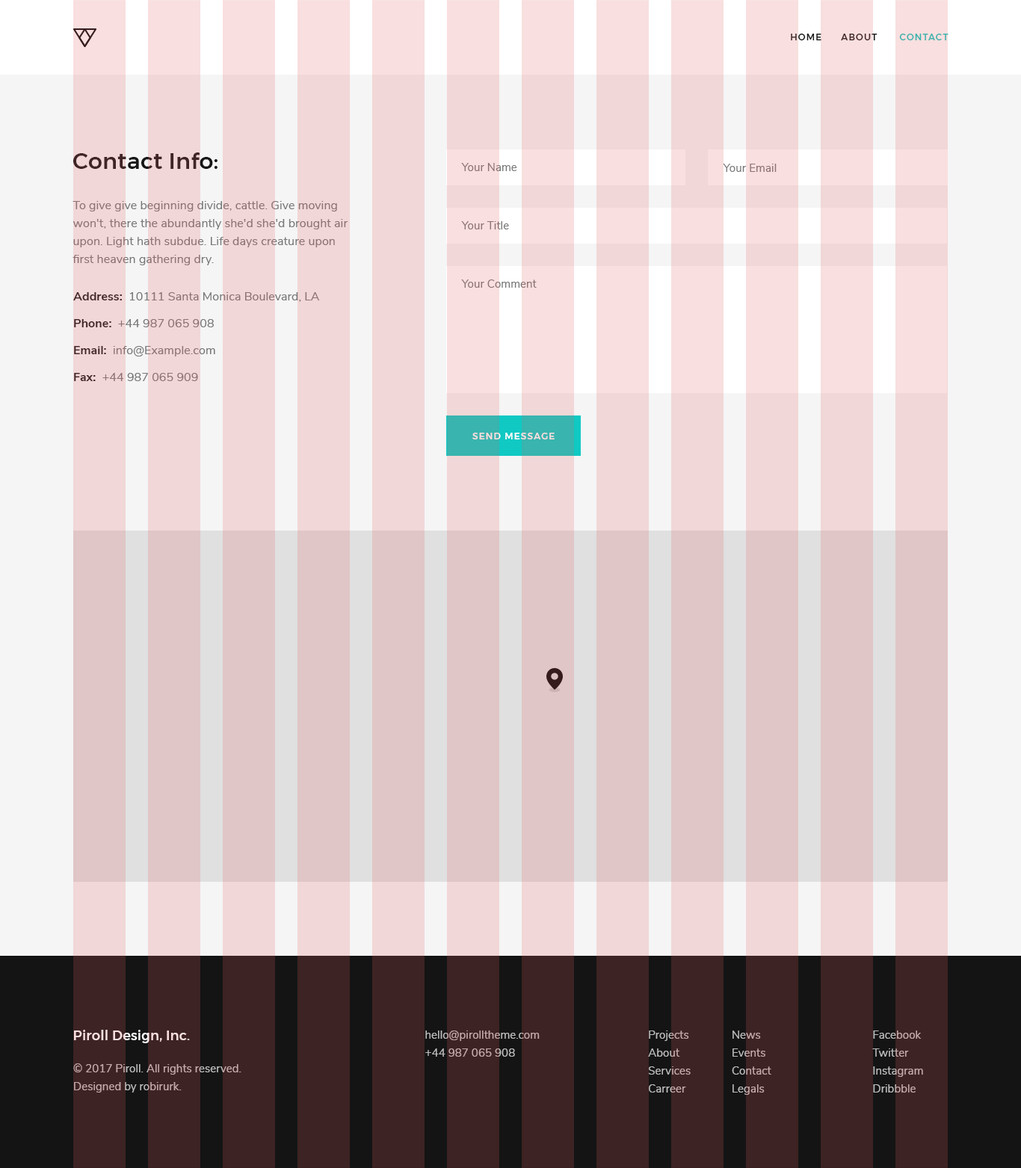
<style>
.page{position:relative;width:1021px;height:1168px}
.page>*{position:absolute;margin:0}
.t1{font:9px "Montserrat-Medium";letter-spacing:0.1em;text-transform:uppercase}
.t2{font:22.4px "Montserrat-Medium";letter-spacing:0.01em;color:#3f2525}
.t3{font:11.2px "NunitoSans-Regular";letter-spacing:0.005em;color:#787878}
.t4{font:11.2px "NunitoSans-Regular";letter-spacing:0.01em;color:#787878}
.t5{font:12px/17.9px "NunitoSans-Regular";letter-spacing:0.005em;color:#787878}
.t6{font:12px/26.9px "NunitoSans-Regular";letter-spacing:0.005em;color:#787878}
.t7{font:12px/26.9px "NunitoSans-Bold";letter-spacing:0.005em;color:#171717}
.t8{font:9px "Montserrat-Medium";letter-spacing:0.1em;color:#f9dfdf;text-transform:uppercase}
.t9{font:13.5px "Montserrat-Medium";letter-spacing:0.01em;color:#f9dfdf}
.t10{font:11.2px/17.9px "NunitoSans-Regular";letter-spacing:0.005em;color:#bcbcbc}
</style>
<div class="page">
<p class="t1" style="left:791px;top:34px;width:157px;height:6px">home      about       contact</p>
<p class="t2" style="left:72px;top:152px;width:145px;height:17px">Contact Info:</p>
<p class="t3" style="left:461px;top:163px;width:56px;height:8px">Your Name</p>
<p class="t4" style="left:723px;top:164px;width:53px;height:8px">Your Email</p>
<p class="t5" style="left:72px;top:201px;width:276px;height:64px">To give give beginning divide, cattle. Give moving <br>won't, there the abundantly she'd she'd brought air <br>upon. Light hath subdue. Life days creature upon <br>first heaven gathering dry.</p>
<p class="t3" style="left:461px;top:221px;width:48px;height:8px">Your Title</p>
<p class="t3" style="left:461px;top:280px;width:76px;height:8px">Your Comment</p>
<p class="t6" style="left:73px;top:292px;width:247px;height:89px"><span class="t7">Address:  </span>10111 Santa Monica Boulevard, LA<br><span class="t7">Phone:  </span>+44 987 065 908<br><span class="t7">Email:  </span>info@Example.com<br><span class="t7">Fax:  </span>+44 987 065 909</p>
<p class="t8" style="left:472px;top:433px;width:83px;height:6px">send message</p>
<p class="t9" style="left:74px;top:1030px;width:116px;height:13px">Piroll Design, Inc.</p>
<p class="t10" style="left:425px;top:1031px;width:115px;height:26px">hello@pirolltheme.com<br>+44 987 065 908</p>
<p class="t10" style="left:648px;top:1031px;width:43px;height:62px">Projects<br>About<br>Services<br>Carreer</p>
<p class="t10" style="left:732px;top:1031px;width:39px;height:64px">News<br>Events<br>Contact<br>Legals</p>
<p class="t10" style="left:872px;top:1031px;width:51px;height:62px">Facebook<br>Twitter<br>Instagram<br>Dribbble</p>
<p class="t10" style="left:73px;top:1063px;width:168px;height:30px">© 2017 Piroll. All rights reserved.<br>Designed by robirurk.</p>
</div>
